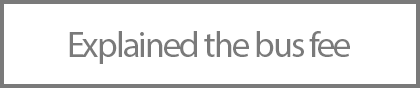
<style>
.page{position:relative;width:420px;height:88px;background:#ffffff}
.page>*{position:absolute;margin:0}
.t1{font:36px "MyriadPro-Regular";letter-spacing:-0.05em;color:#7a7a7a}
</style>
<div class="page">
<p class="t1" style="left:69px;top:31px;width:281px;height:33px">Explained the bus fee</p>
</div>
